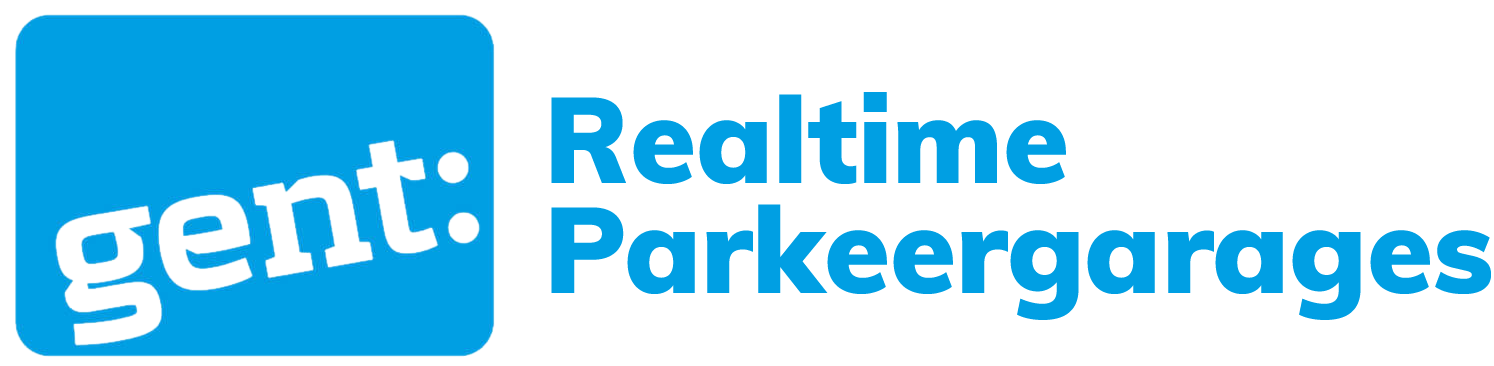
<style>
.page{position:relative;width:1494px;height:366px;background:#ffffff}
.page>*{position:absolute;margin:0}
.t1{font:120px/110px "Muli-Black";color:#009fe3}
</style>
<div class="page">
<p class="t1" style="left:551px;top:92px;width:940px;height:228px">Realtime<br>Parkeergarages</p>
</div>
